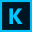
<style>
.page{position:relative;width:32px;height:32px;background:#001523}
.page>*{position:absolute;margin:0}
.t1{font:22.2px "NirmalaUI-Bold";color:#00c7ff}
</style>
<div class="page">
<p class="t1" style="left:9px;top:8px;width:14px;height:16px">K</p>
</div>
